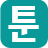
<style>
.page{position:relative;width:48px;height:48px;background:#099999}
.page>*{position:absolute;margin:0}
.t1{font:40px "NEXONFootballGothicB";color:#fefefe}
</style>
<div class="page">
<p class="t1" style="left:8px;top:6px;width:31px;height:36px">툰</p>
</div>
